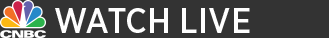
<style>
.page{position:relative;width:329px;height:38px;background:#333333}
.page>*{position:absolute;margin:0}
.t1{font:33.5px "GothamNarrowSSm-Medium";color:#fefefe}
</style>
<div class="page">
<p class="t1" style="left:55px;top:8px;width:195px;height:25px">WATCH LIVE</p>
</div>
